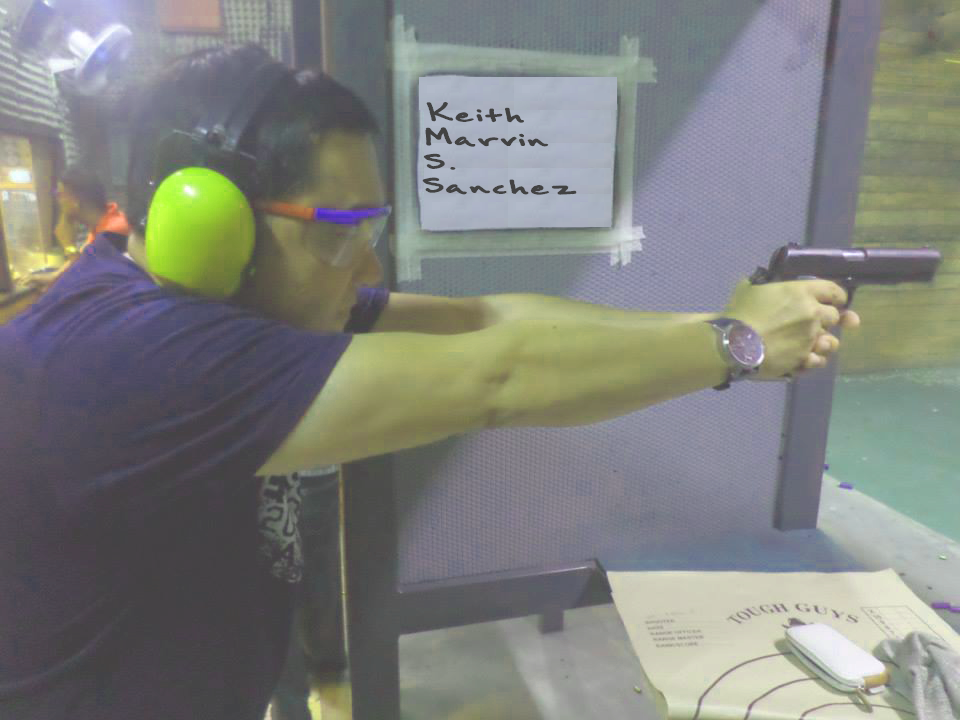
<style>
.page{position:relative;width:960px;height:720px}
.page>*{position:absolute;margin:0}
.t1{font:35.8px/23.9px "BrownBagLunch";color:#424242;scale:1.68 1}
</style>
<div class="page">
<p class="t1" style="left:422px;top:102px;width:155px;height:93px;rotate:1deg">Keith <br>Marvin<br>S. <br>Sanchez</p>
</div>
